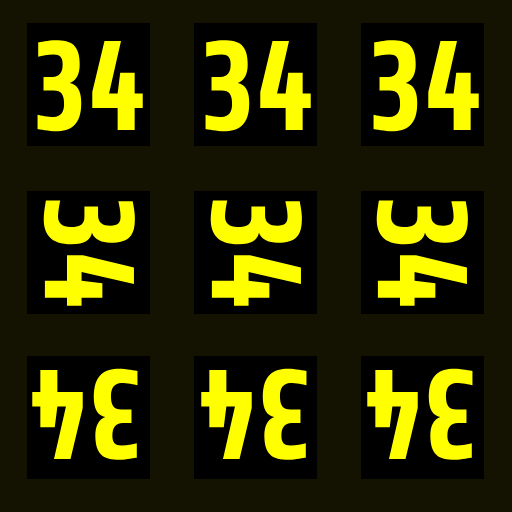
<style>
.page{position:relative;width:512px;height:512px;background:#141301}
.page>*{position:absolute;margin:0}
.t1{font:130px "Share-BoldOSF";color:#ffff00}
</style>
<div class="page">
<p class="t1" style="left:37px;top:40px;width:106px;height:92px">34</p>
<p class="t1" style="left:205px;top:40px;width:106px;height:92px">34</p>
<p class="t1" style="left:373px;top:40px;width:106px;height:92px">34</p>
<p class="t1" style="left:43px;top:200px;width:92px;height:106px;rotate:90deg">34</p>
<p class="t1" style="left:210px;top:200px;width:92px;height:106px;rotate:90deg">34</p>
<p class="t1" style="left:376px;top:200px;width:92px;height:106px;rotate:90deg">34</p>
<p class="t1" style="left:32px;top:368px;width:106px;height:92px;rotate:-180deg">34</p>
<p class="t1" style="left:201px;top:368px;width:106px;height:92px;rotate:-180deg">34</p>
<p class="t1" style="left:367px;top:368px;width:106px;height:92px;rotate:-180deg">34</p>
</div>
